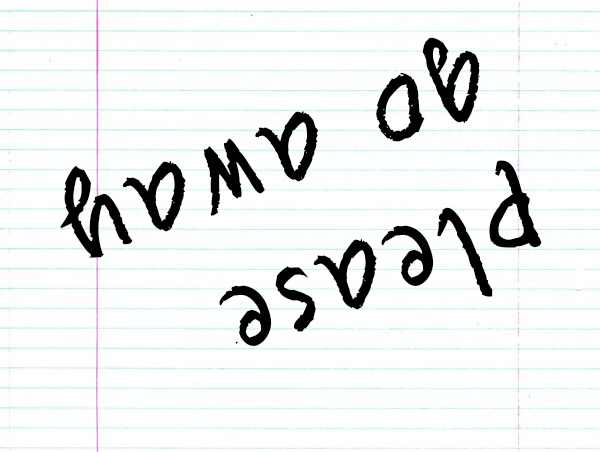
<style>
.page{position:relative;width:600px;height:452px;background:#ffffff}
.page>*{position:absolute;margin:0}
.t1{font:116.6px "Quikhand1.1";letter-spacing:0.1em;color:#000000}
</style>
<div class="page">
<p class="t1" style="left:60px;top:37px;width:482px;height:309px;rotate:160deg">please<br>go away</p>
</div>
